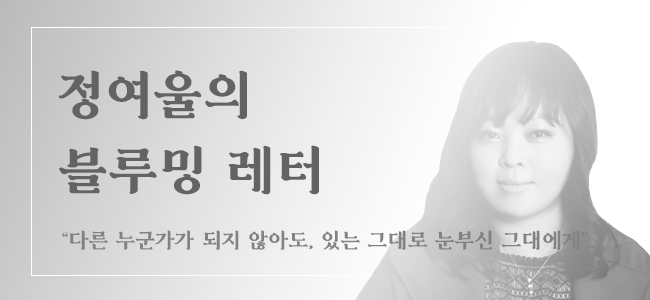
<style>
.page{position:relative;width:650px;height:300px}
.page>*{position:absolute;margin:0}
.t1{font:50px/75px "MuseumClassicBold";color:#636363}
.t2{font:20px "MuseumClassicBold";color:#828282}
</style>
<div class="page">
<p class="t1" style="left:58px;top:70px;width:261px;height:125px">정여울의<br>블루밍 레터</p>
<p class="t2" style="left:62px;top:230px;width:526px;height:20px">“다른 누군가가 되지 않아도, 있는 그대로 눈부신 그대에게”</p>
</div>
